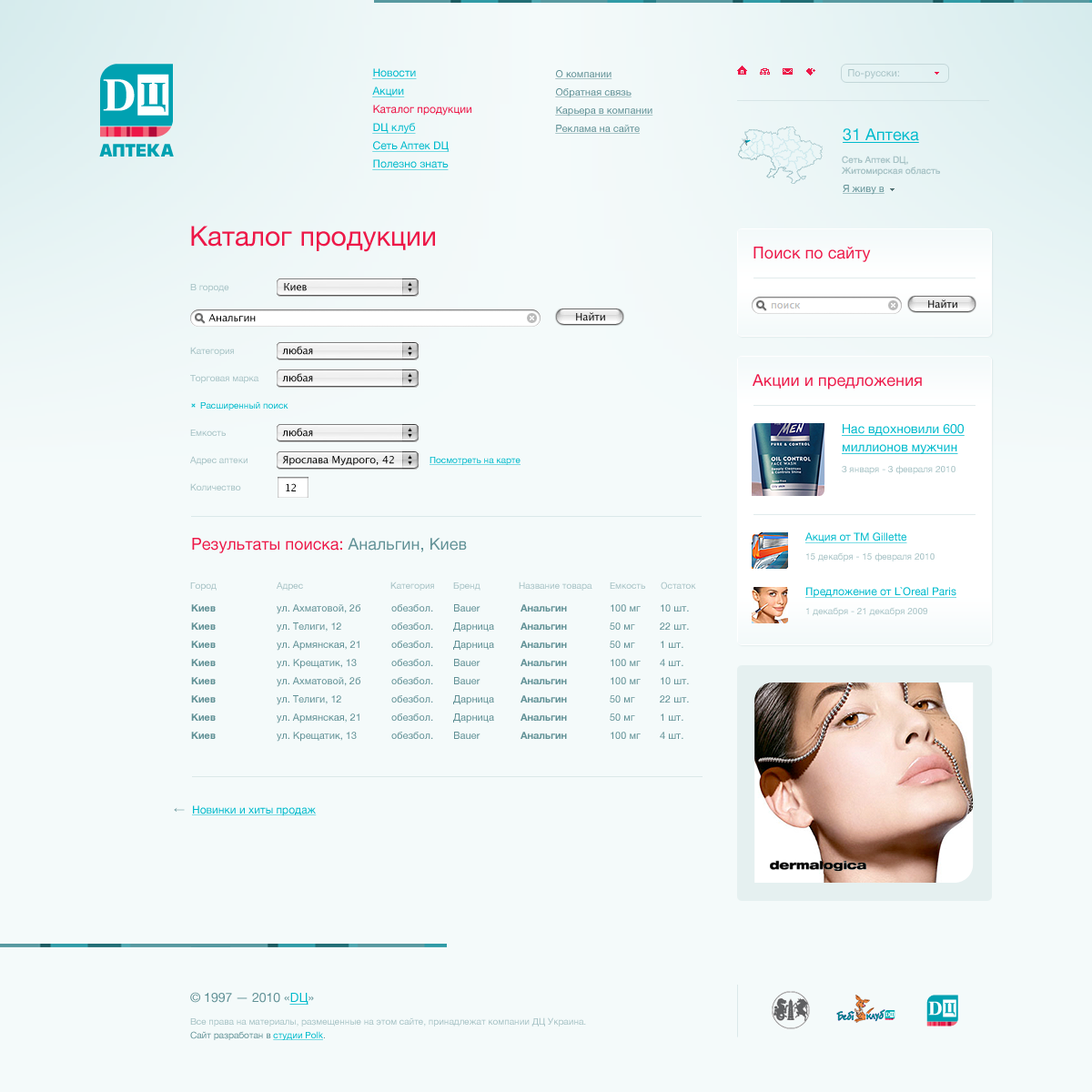
<style>
.page{position:relative;width:1092px;height:1092px;background:#f4fafa}
.page>*{position:absolute;margin:0}
.t1{font:10.9px "HelveticaNeue";color:#00bacc;text-decoration:underline}
.t2{font:10px "HelveticaNeue";color:#619196;text-decoration:underline}
.t3{font:10px "HelveticaNeue";color:#a6c2c5}
.t4{font:10.9px "HelveticaNeue";color:#ed1848}
.t5{font:16.4px "HelveticaNeue";color:#00bacc;text-decoration:underline}
.t6{font:9.1px "HelveticaNeue";color:#a6c2c5}
.t7{font:27.3px "HelveticaNeue";color:#ed1848}
.t8{font:16.4px "HelveticaNeue";color:#ed1848}
.t9{font:10px "LucidaGrande";color:#000000}
.t10{font:9.1px "HelveticaNeue";color:#00bacc}
.t11{font:12.7px/18.2px "HelveticaNeue";color:#00bacc;text-decoration:underline}
.t12{font:9.1px "HelveticaNeue";color:#00bacc;text-decoration:underline}
.t13{font:16.4px "HelveticaNeue";color:#619196}
.t14{font:10px "HelveticaNeue-Bold";color:#619196}
.t15{font:10px "HelveticaNeue";color:#619196}
.t16{font:10.9px "ArialMT"}
.t17{font:12.7px "HelveticaNeue";color:#619196}
.t18{font:12.7px "HelveticaNeue";color:#00bacc;text-decoration:underline}
.t19{font:9.1px "HelveticaNeue";color:#619196}
</style>
<div class="page">
<p class="t1" style="left:372px;top:68px;width:45px;height:11px">Новости</p>
<p class="t2" style="left:555px;top:70px;width:57px;height:9px">О компании</p>
<p class="t3" style="left:848px;top:69px;width:51px;height:10px">По-русски:</p>
<p class="t1" style="left:372px;top:86px;width:33px;height:11px">Акции</p>
<p class="t2" style="left:555px;top:88px;width:77px;height:10px">Обратная связь</p>
<p class="t4" style="left:373px;top:105px;width:98px;height:11px">Каталог продукции</p>
<p class="t2" style="left:555px;top:106px;width:98px;height:10px">Карьера в компании</p>
<p class="t1" style="left:372px;top:123px;width:44px;height:11px">DЦ клуб</p>
<p class="t2" style="left:555px;top:125px;width:85px;height:9px">Реклама на сайте</p>
<p class="t5" style="left:843px;top:128px;width:76px;height:15px">31 Аптека</p>
<p class="t1" style="left:372px;top:141px;width:78px;height:11px">Сеть Аптек DЦ</p>
<p class="t1" style="left:372px;top:159px;width:77px;height:11px">Полезно знать</p>
<p class="t6" style="left:841px;top:156px;width:99px;height:20px">Сеть Аптек DЦ,<br>Житомирская область</p>
<p class="t2" style="left:843px;top:185px;width:42px;height:10px">Я живу в</p>
<p class="t7" style="left:191px;top:226px;width:244px;height:26px">Каталог продукции</p>
<p class="t8" style="left:753px;top:247px;width:118px;height:15px">Поиск по сайту</p>
<p class="t6" style="left:190px;top:284px;width:39px;height:8px">В городе</p>
<p class="t9" style="left:284px;top:283px;width:23px;height:8px">Киев</p>
<p class="t9" style="left:928px;top:299px;width:29px;height:9px">Найти</p>
<p class="t9" style="left:208px;top:314px;width:48px;height:8px">Анальгин</p>
<p class="t9" style="left:576px;top:312px;width:29px;height:9px">Найти</p>
<p class="t6" style="left:190px;top:347px;width:44px;height:9px">Категория</p>
<p class="t9" style="left:282px;top:346px;width:31px;height:9px">любая</p>
<p class="t6" style="left:190px;top:375px;width:69px;height:8px">Торговая марка</p>
<p class="t9" style="left:282px;top:373px;width:31px;height:9px">любая</p>
<p class="t8" style="left:753px;top:374px;width:169px;height:15px">Акции и предложения</p>
<p class="t10" style="left:200px;top:401px;width:88px;height:9px">Расширенный поиск</p>
<p class="t11" style="left:842px;top:424px;width:123px;height:30px">Нас вдохновили 600<br>миллионов мужчин</p>
<p class="t6" style="left:190px;top:430px;width:36px;height:6px">Емкость</p>
<p class="t9" style="left:282px;top:428px;width:31px;height:9px">любая</p>
<p class="t6" style="left:190px;top:456px;width:58px;height:9px">Адрес аптеки</p>
<p class="t9" style="left:282px;top:456px;width:112px;height:10px">Ярослава Мудрого, 42</p>
<p class="t12" style="left:430px;top:457px;width:91px;height:8px">Посмотреть на карте</p>
<p class="t6" style="left:842px;top:465px;width:113px;height:9px">3 января - 3 февраля 2010</p>
<p class="t6" style="left:190px;top:483px;width:51px;height:7px">Количество</p>
<p class="t9" style="left:286px;top:483px;width:10px;height:8px">12</p>
<p class="t1" style="left:805px;top:532px;width:102px;height:11px">Акция от ТМ Gillette</p>
<p class="t8" style="left:192px;top:538px;width:275px;height:15px">Результаты поиска: <span class="t13">Анальгин, Киев</span></p>
<p class="t6" style="left:806px;top:552px;width:129px;height:9px">15 декабря - 15 февраля 2010</p>
<p class="t6" style="left:277px;top:581px;width:26px;height:10px">Адрес</p>
<p class="t6" style="left:390px;top:581px;width:44px;height:10px">Категория</p>
<p class="t6" style="left:519px;top:581px;width:73px;height:10px">Название товара</p>
<p class="t6" style="left:661px;top:581px;width:35px;height:9px">Остаток</p>
<p class="t6" style="left:190px;top:582px;width:27px;height:9px">Город</p>
<p class="t6" style="left:453px;top:582px;width:27px;height:9px">Бренд</p>
<p class="t6" style="left:610px;top:582px;width:35px;height:7px">Емкость</p>
<p class="t1" style="left:805px;top:587px;width:151px;height:11px">Предложение от L`Oreal Paris</p>
<p class="t14" style="left:191px;top:604px;width:25px;height:8px">Киев</p>
<p class="t15" style="left:277px;top:604px;width:83px;height:10px">ул. Ахматовой, 2б</p>
<p class="t15" style="left:391px;top:604px;width:42px;height:8px">обезбол.</p>
<p class="t15" style="left:454px;top:604px;width:26px;height:8px">Bauer</p>
<p class="t14" style="left:521px;top:604px;width:46px;height:8px">Анальгин</p>
<p class="t15" style="left:611px;top:604px;width:30px;height:8px">100 мг</p>
<p class="t15" style="left:661px;top:604px;width:28px;height:8px">10 шт.</p>
<p class="t6" style="left:806px;top:607px;width:121px;height:9px">1 декабря - 21 декабря 2009</p>
<p class="t14" style="left:191px;top:622px;width:25px;height:8px">Киев</p>
<p class="t15" style="left:277px;top:622px;width:64px;height:10px">ул. Телиги, 12</p>
<p class="t15" style="left:391px;top:622px;width:42px;height:8px">обезбол.</p>
<p class="t15" style="left:453px;top:622px;width:41px;height:10px">Дарница</p>
<p class="t14" style="left:521px;top:622px;width:46px;height:8px">Анальгин</p>
<p class="t15" style="left:610px;top:622px;width:25px;height:8px">50 мг</p>
<p class="t15" style="left:660px;top:622px;width:29px;height:8px">22 шт.</p>
<p class="t14" style="left:191px;top:641px;width:25px;height:7px">Киев</p>
<p class="t15" style="left:277px;top:641px;width:82px;height:10px">ул. Армянская, 21</p>
<p class="t15" style="left:391px;top:641px;width:42px;height:7px">обезбол.</p>
<p class="t15" style="left:453px;top:641px;width:41px;height:10px">Дарница</p>
<p class="t14" style="left:521px;top:641px;width:46px;height:7px">Анальгин</p>
<p class="t15" style="left:610px;top:641px;width:25px;height:7px">50 мг</p>
<p class="t15" style="left:661px;top:641px;width:22px;height:7px">1 шт.</p>
<p class="t14" style="left:191px;top:659px;width:25px;height:7px">Киев</p>
<p class="t15" style="left:277px;top:659px;width:80px;height:10px">ул. Крещатик, 13</p>
<p class="t15" style="left:391px;top:659px;width:42px;height:7px">обезбол.</p>
<p class="t15" style="left:454px;top:659px;width:26px;height:7px">Bauer</p>
<p class="t14" style="left:521px;top:659px;width:46px;height:7px">Анальгин</p>
<p class="t15" style="left:611px;top:659px;width:30px;height:7px">100 мг</p>
<p class="t15" style="left:660px;top:659px;width:23px;height:7px">4 шт.</p>
<p class="t14" style="left:191px;top:677px;width:25px;height:7px">Киев</p>
<p class="t15" style="left:277px;top:677px;width:83px;height:10px">ул. Ахматовой, 2б</p>
<p class="t15" style="left:391px;top:677px;width:42px;height:7px">обезбол.</p>
<p class="t15" style="left:454px;top:677px;width:26px;height:7px">Bauer</p>
<p class="t14" style="left:521px;top:677px;width:46px;height:7px">Анальгин</p>
<p class="t15" style="left:611px;top:677px;width:30px;height:7px">100 мг</p>
<p class="t15" style="left:661px;top:677px;width:28px;height:7px">10 шт.</p>
<p class="t14" style="left:191px;top:695px;width:25px;height:8px">Киев</p>
<p class="t15" style="left:277px;top:695px;width:64px;height:10px">ул. Телиги, 12</p>
<p class="t15" style="left:391px;top:695px;width:42px;height:8px">обезбол.</p>
<p class="t15" style="left:453px;top:695px;width:41px;height:10px">Дарница</p>
<p class="t14" style="left:521px;top:695px;width:46px;height:8px">Анальгин</p>
<p class="t15" style="left:610px;top:695px;width:25px;height:8px">50 мг</p>
<p class="t15" style="left:660px;top:695px;width:29px;height:8px">22 шт.</p>
<p class="t14" style="left:191px;top:713px;width:25px;height:8px">Киев</p>
<p class="t15" style="left:277px;top:713px;width:82px;height:10px">ул. Армянская, 21</p>
<p class="t15" style="left:391px;top:713px;width:42px;height:8px">обезбол.</p>
<p class="t15" style="left:453px;top:713px;width:41px;height:10px">Дарница</p>
<p class="t14" style="left:521px;top:713px;width:46px;height:8px">Анальгин</p>
<p class="t15" style="left:610px;top:713px;width:25px;height:8px">50 мг</p>
<p class="t15" style="left:661px;top:713px;width:22px;height:8px">1 шт.</p>
<p class="t14" style="left:191px;top:732px;width:25px;height:7px">Киев</p>
<p class="t15" style="left:277px;top:732px;width:80px;height:10px">ул. Крещатик, 13</p>
<p class="t15" style="left:391px;top:732px;width:42px;height:7px">обезбол.</p>
<p class="t15" style="left:454px;top:732px;width:26px;height:7px">Bauer</p>
<p class="t14" style="left:521px;top:732px;width:46px;height:7px">Анальгин</p>
<p class="t15" style="left:611px;top:732px;width:30px;height:7px">100 мг</p>
<p class="t15" style="left:660px;top:732px;width:23px;height:7px">4 шт.</p>
<p class="t16" style="left:174px;top:807px;width:11px;height:5px">←</p>
<p class="t1" style="left:192px;top:805px;width:125px;height:11px">Новинки и хиты продаж</p>
<p class="t17" style="left:190px;top:992px;width:124px;height:13px">© 1997 — 2010 «<span class="t18">DЦ</span>»</p>
<p class="t6" style="left:190px;top:1017px;width:396px;height:9px">Все права на материалы, размещенные на этом сайте, принадлежат компании ДЦ Украина.</p>
<p class="t19" style="left:190px;top:1031px;width:135px;height:9px">Сайт разработан в <span class="t12">студии Polk</span>.</p>
</div>
